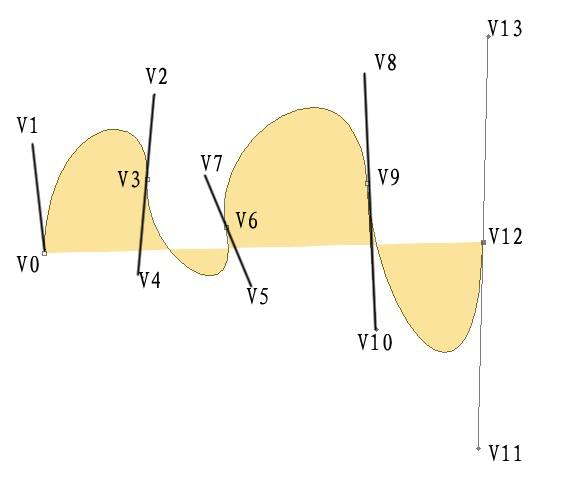
<style>
.page{position:relative;width:561px;height:489px;background:#ffffff}
.page>*{position:absolute;margin:0}
.t1{font:24px "FangSong_GB2312";color:#000000}
</style>
<div class="page">
<p class="t1" style="left:487px;top:19px;width:35px;height:18px">V13</p>
<p class="t1" style="left:374px;top:53px;width:22px;height:18px">V8</p>
<p class="t1" style="left:145px;top:67px;width:22px;height:18px">V2</p>
<p class="t1" style="left:16px;top:116px;width:22px;height:18px">V1</p>
<p class="t1" style="left:200px;top:155px;width:22px;height:17px">V7</p>
<p class="t1" style="left:117px;top:170px;width:23px;height:18px">V3</p>
<p class="t1" style="left:377px;top:168px;width:22px;height:18px">V9</p>
<p class="t1" style="left:235px;top:211px;width:22px;height:18px">V6</p>
<p class="t1" style="left:488px;top:227px;width:34px;height:18px">V12</p>
<p class="t1" style="left:16px;top:256px;width:23px;height:17px">V0</p>
<p class="t1" style="left:138px;top:271px;width:22px;height:18px">V4</p>
<p class="t1" style="left:246px;top:288px;width:22px;height:17px">V5</p>
<p class="t1" style="left:357px;top:333px;width:35px;height:18px">V10</p>
<p class="t1" style="left:488px;top:444px;width:34px;height:18px">V11</p>
</div>
